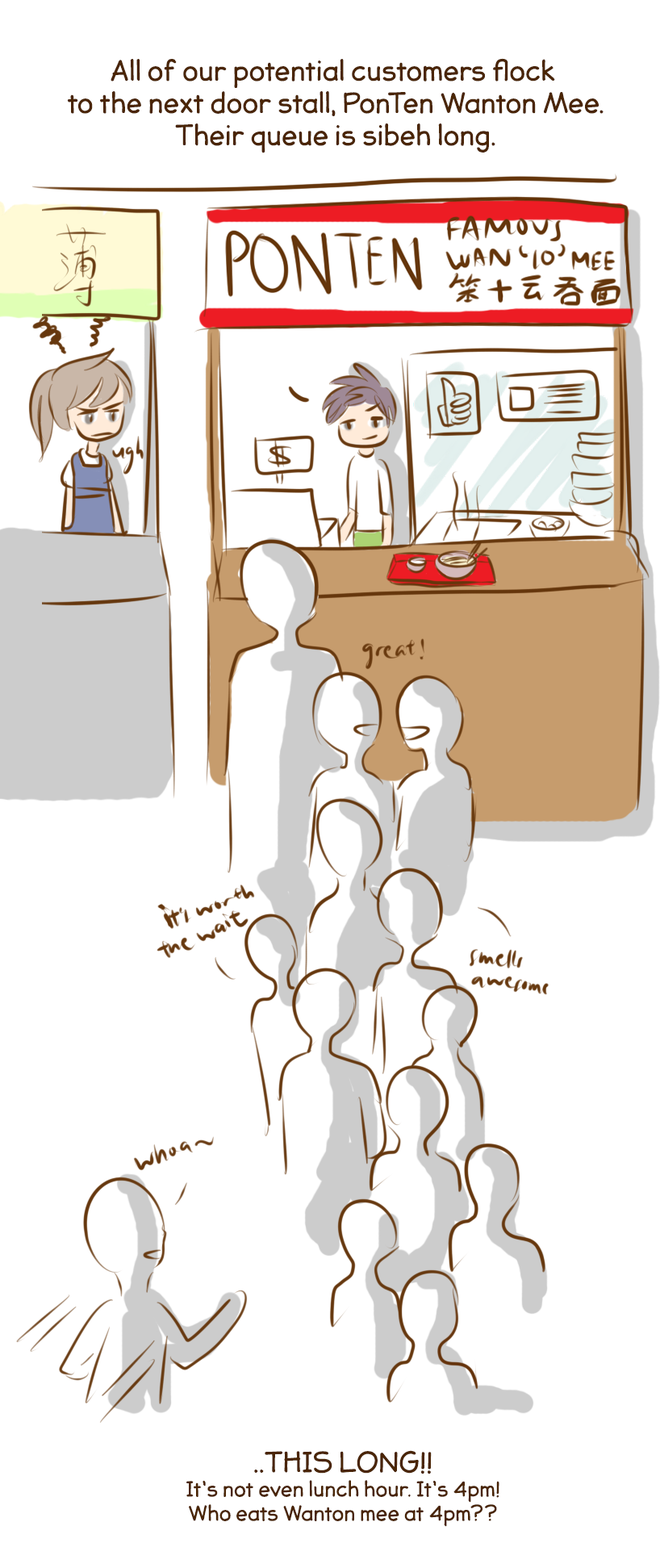
<style>
.page{position:relative;width:660px;height:1568px;background:#ffffff}
.page>*{position:absolute;margin:0}
.t1{font:26.9px "JollyGoodSans-Basic";color:#4a2505}
.t2{font:20.2px "JollyGoodSans-Basic";color:#4a2505}
</style>
<div class="page">
<p class="t1" style="left:67px;top:58px;width:537px;height:95px;text-align:center">All of our potential customers flock <br>to the next door stall, PonTen Wanton Mee.<br>Their queue is sibeh long.</p>
<p class="t2" style="left:186px;top:1450px;width:314px;height:77px;text-align:center"><span class="t1">..THIS LONG!!<br></span>It’s not even lunch hour. It’s 4pm!<br>Who eats Wanton mee at 4pm??</p>
</div>
